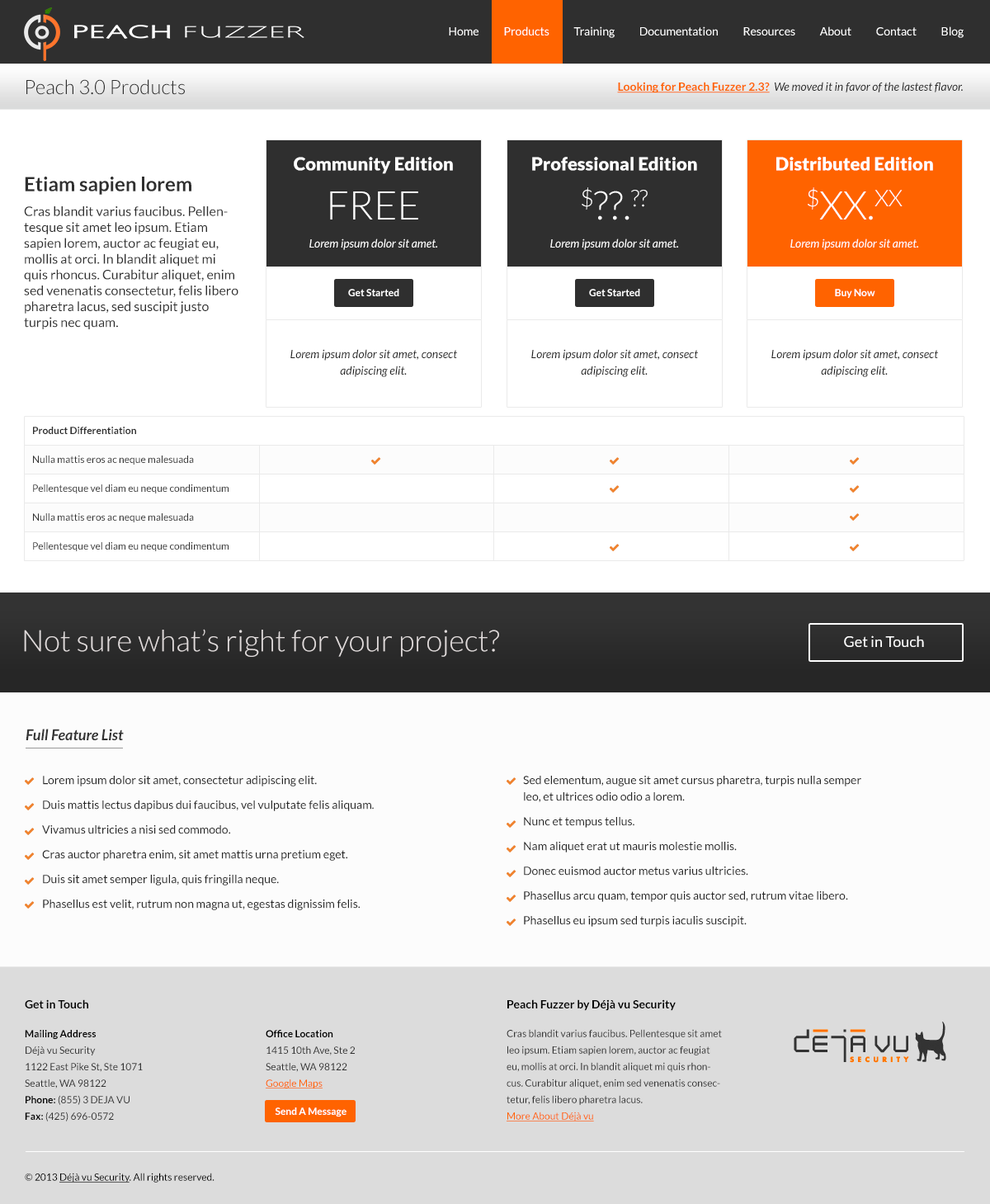
<style>
.page{position:relative;width:990px;height:1204px;background:#ffffff}
.page>*{position:absolute;margin:0}
.t1{font:11.6px "Lato-Regular";color:#ffffff}
.t2{font:19.8px "Lato-Light";color:#2f2f2f}
.t3{font:11.6px "Lato-Italic";color:#252525}
.t4{font:11.6px "Lato-Bold";color:#ff6300;text-decoration:underline}
.t5{font:18.2px "Lato-Black";color:#ffffff}
.t6{font:19.8px "Lato-Bold";color:#2f2f2f}
.t7{font:39.6px "Lato-Light";color:#ffffff}
.t8{font:13.2px "Lato-Regular";color:#2f2f2f}
.t9{font:11.6px "Lato-Italic";color:#ffffff}
.t10{font:9.9px "Lato-Bold";color:#ffffff}
.t11{font:11.6px/16.5px "Lato-Italic";color:#252525}
.t12{font:9.9px "Lato-Bold";color:#2f2f2f}
.t13{font:9.9px "Lato-Regular";color:#2f2f2f}
.t14{font:29.7px "Lato-Light";color:#e0dbdb}
.t15{font:14.9px "Lato-Regular";color:#fefefe}
.t16{font:14.9px "Lato-BoldItalic";color:#333333}
.t17{font:11.6px/16.5px "Lato-Regular";color:#252525}
.t18{font:11.6px "Lato-Bold";color:#000000}
.t19{font:9.9px/16.5px "Lato-Regular";color:#333333}
.t20{font:9.9px/16.5px "Lato-Bold";color:#000000}
.t21{font:9.9px/16.5px "Lato-Regular";color:#ff6300;text-decoration:underline}
.t22{font:9.9px "Lato-Regular";color:#000000}
.t23{font:9.9px "Lato-Regular";color:#000000;text-decoration:underline}
</style>
<div class="page">
<p class="t1" style="left:449px;top:26px;width:515px;height:12px">Home           Products           Training           Documentation           Resources           About           Contact           Blog</p>
<p class="t2" style="left:26px;top:79px;width:159px;height:16px">Peach 3.0 Products</p>
<p class="t3" style="left:617px;top:82px;width:346px;height:11px"><span class="t4">Looking for Peach Fuzzer 2.3?  </span>We moved it in favor of the lastest flavor.</p>
<p class="t5" style="left:294px;top:157px;width:159px;height:17px">Community Edition</p>
<p class="t5" style="left:532px;top:157px;width:165px;height:14px">Professional Edition</p>
<p class="t5" style="left:777px;top:157px;width:156px;height:14px">Distributed Edition</p>
<p class="t6" style="left:25px;top:177px;width:166px;height:18px">Etiam sapien lorem</p>
<p class="t7" style="left:330px;top:191px;width:88px;height:29px">FREE</p>
<p class="t7" style="left:582px;top:187px;width:66px;height:33px">$??.??</p>
<p class="t7" style="left:808px;top:187px;width:95px;height:33px">$XX.XX</p>
<p class="t8" style="left:24px;top:206px;width:215px;height:123px">Cras blandit varius faucibus. Pellentesque sit amet leo ipsum. Etiam sapien lorem, auctor ac feugiat eu, mollis at orci. In blandit aliquet mi quis rhoncus. Curabitur aliquet, enim sed venenatis consectetur, felis libero pharetra lacus, sed suscipit justo turpis nec quam.</p>
<p class="t9" style="left:309px;top:239px;width:128px;height:11px">Lorem ipsum dolor sit amet.</p>
<p class="t9" style="left:550px;top:239px;width:128px;height:11px">Lorem ipsum dolor sit amet.</p>
<p class="t9" style="left:791px;top:239px;width:128px;height:11px">Lorem ipsum dolor sit amet.</p>
<p class="t10" style="left:348px;top:289px;width:51px;height:7px">Get Started</p>
<p class="t10" style="left:589px;top:289px;width:51px;height:7px">Get Started</p>
<p class="t10" style="left:835px;top:289px;width:41px;height:9px">Buy Now</p>
<p class="t11" style="left:290px;top:349px;width:167px;height:28px;text-align:center">Lorem ipsum dolor sit amet, consect adipiscing elit.</p>
<p class="t11" style="left:531px;top:349px;width:167px;height:28px;text-align:center">Lorem ipsum dolor sit amet, consect adipiscing elit.</p>
<p class="t11" style="left:772px;top:349px;width:166px;height:28px;text-align:center">Lorem ipsum dolor sit amet, consect adipiscing elit.</p>
<p class="t12" style="left:33px;top:427px;width:103px;height:7px">Product Differentiation</p>
<p class="t13" style="left:33px;top:456px;width:161px;height:9px">Nulla mattis eros ac neque malesuada</p>
<p class="t13" style="left:33px;top:484px;width:196px;height:10px">Pellentesque vel diam eu neque condimentum</p>
<p class="t13" style="left:33px;top:513px;width:161px;height:9px">Nulla mattis eros ac neque malesuada</p>
<p class="t13" style="left:33px;top:542px;width:196px;height:9px">Pellentesque vel diam eu neque condimentum</p>
<p class="t14" style="left:24px;top:629px;width:475px;height:28px">Not sure what’s right for your project?</p>
<p class="t15" style="left:844px;top:635px;width:80px;height:12px">Get in Touch</p>
<p class="t16" style="left:26px;top:729px;width:98px;height:11px">Full Feature List</p>
<p class="t17" style="left:42px;top:776px;width:332px;height:134px">Lorem ipsum dolor sit amet, consectetur adipiscing elit. <br>Duis mattis lectus dapibus dui faucibus, vel vulputate felis aliquam. <br>Vivamus ultricies a nisi sed commodo. <br>Cras auctor pharetra enim, sit amet mattis urna pretium eget. <br>Duis sit amet semper ligula, quis fringilla neque. <br>Phasellus est velit, rutrum non magna ut, egestas dignissim felis.</p>
<p class="t17" style="left:523px;top:776px;width:339px;height:151px">Sed elementum, augue sit amet cursus pharetra, turpis nulla semper leo, et ultrices odio odio a lorem. <br>Nunc et tempus tellus. <br>Nam aliquet erat ut mauris molestie mollis. <br>Donec euismod auctor metus varius ultricies. <br>Phasellus arcu quam, tempor quis auctor sed, rutrum vitae libero. <br>Phasellus eu ipsum sed turpis iaculis suscipit.</p>
<p class="t18" style="left:25px;top:999px;width:63px;height:9px">Get in Touch</p>
<p class="t18" style="left:508px;top:999px;width:168px;height:12px">Peach Fuzzer by Déjà vu Security</p>
<p class="t19" style="left:25px;top:1030px;width:118px;height:92px"><span class="t20">Mailing Address<br></span>Déjà vu Security<br>1122 East Pike St, Ste 1071<br>Seattle, WA 98122<br><span class="t20">Phone: </span>(855) 3 DEJA VU<br><span class="t20">Fax: </span>(425) 696-0572</p>
<p class="t19" style="left:266px;top:1030px;width:89px;height:59px"><span class="t20">Office Location<br></span>1415 10th Ave, Ste 2<br>Seattle, WA 98122<br><span class="t21">Google Maps</span></p>
<p class="t19" style="left:507px;top:1029px;width:215px;height:93px">Cras blandit varius faucibus. Pellentesque sit amet leo ipsum. Etiam sapien lorem, auctor ac feugiat eu, mollis at orci. In blandit aliquet mi quis rhoncus. Curabitur aliquet, enim sed venenatis consectetur, felis libero pharetra lacus.<br><span class="t21">More About Déjà vu</span></p>
<p class="t10" style="left:275px;top:1108px;width:72px;height:9px">Send A Message</p>
<p class="t22" style="left:25px;top:1173px;width:190px;height:10px">© 2013 <span class="t23">Déjà vu Security</span>. All rights reserved.</p>
</div>
